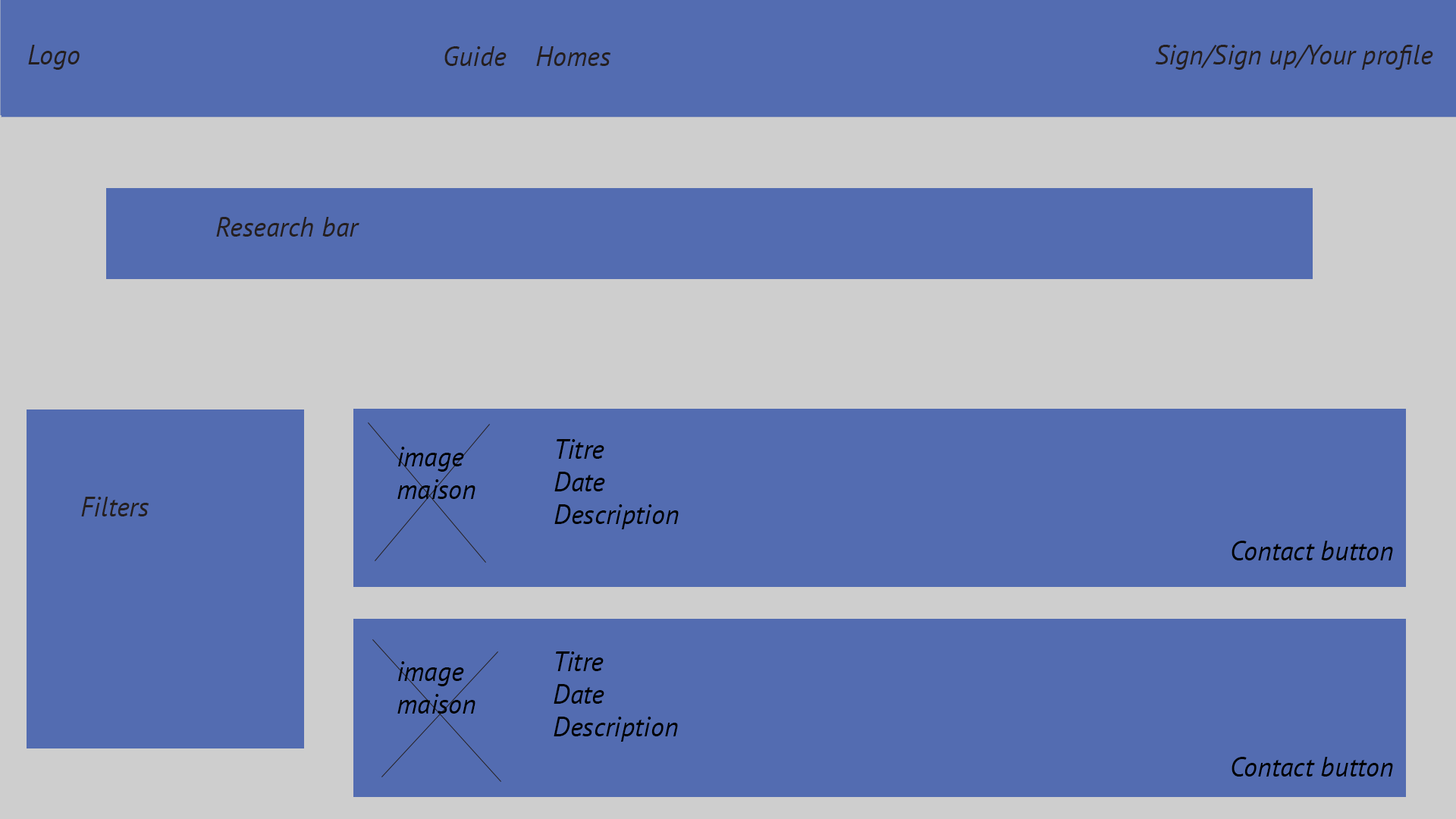
<style>
.page{position:relative;width:1456px;height:819px;background:#536cb1}
.page>*{position:absolute;margin:0}
.t1{font:27.3px "PTSans-Italic";color:#251f1f}
.t2{font:27.3px "PTSans-Italic";color:#000000}
</style>
<div class="page">
<p class="t1" style="left:28px;top:45px;width:52px;height:25px">Logo</p>
<p class="t1" style="left:444px;top:46px;width:167px;height:20px">Guide    Homes</p>
<p class="t1" style="left:1155px;top:45px;width:278px;height:25px">Sign/Sign up/Your profile</p>
<p class="t1" style="left:216px;top:217px;width:143px;height:20px">Research bar</p>
<p class="t2" style="left:397px;top:447px;width:78px;height:52px">image <br>maison</p>
<p class="t2" style="left:554px;top:439px;width:125px;height:90px">Titre <br>Date<br>Description</p>
<p class="t1" style="left:81px;top:497px;width:68px;height:19px">Filters</p>
<p class="t2" style="left:1232px;top:541px;width:161px;height:19px">Contact button</p>
<p class="t2" style="left:554px;top:651px;width:124px;height:91px">Titre <br>Date<br>Description</p>
<p class="t2" style="left:397px;top:661px;width:78px;height:53px">image <br>maison</p>
<p class="t2" style="left:1232px;top:757px;width:161px;height:20px">Contact button</p>
</div>
